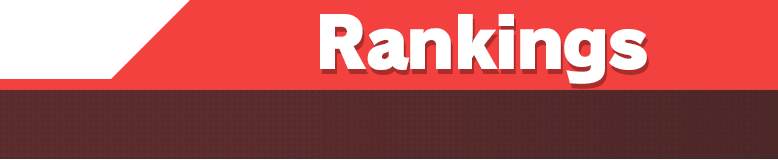
<style>
.page{position:relative;width:778px;height:160px;background:#f3413f}
.page>*{position:absolute;margin:0}
.t1{font:70.7px "RodinPro-UB";letter-spacing:-0.036em;color:#ffffff}
</style>
<div class="page">
<p class="t1" style="left:320px;top:14px;width:327px;height:70px">Rankings</p>
</div>
